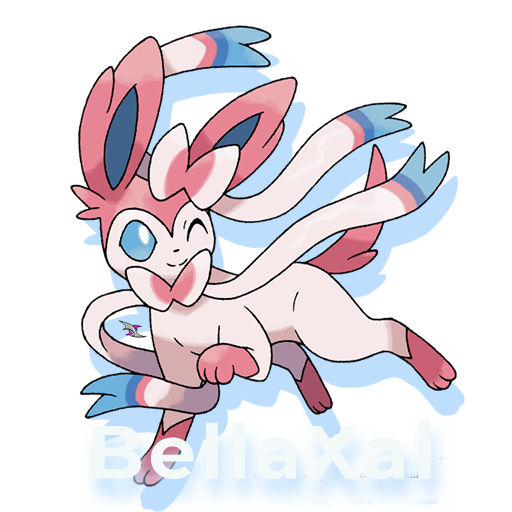
<style>
.page{position:relative;width:512px;height:512px;background:#ffffff}
.page>*{position:absolute;margin:0}
.t1{font:75.1px "Montserrat-Bold";letter-spacing:0.06em;color:#f3fafa}
</style>
<div class="page">
<p class="t1" style="left:92px;top:419px;width:340px;height:60px">BellaXai</p>
</div>
